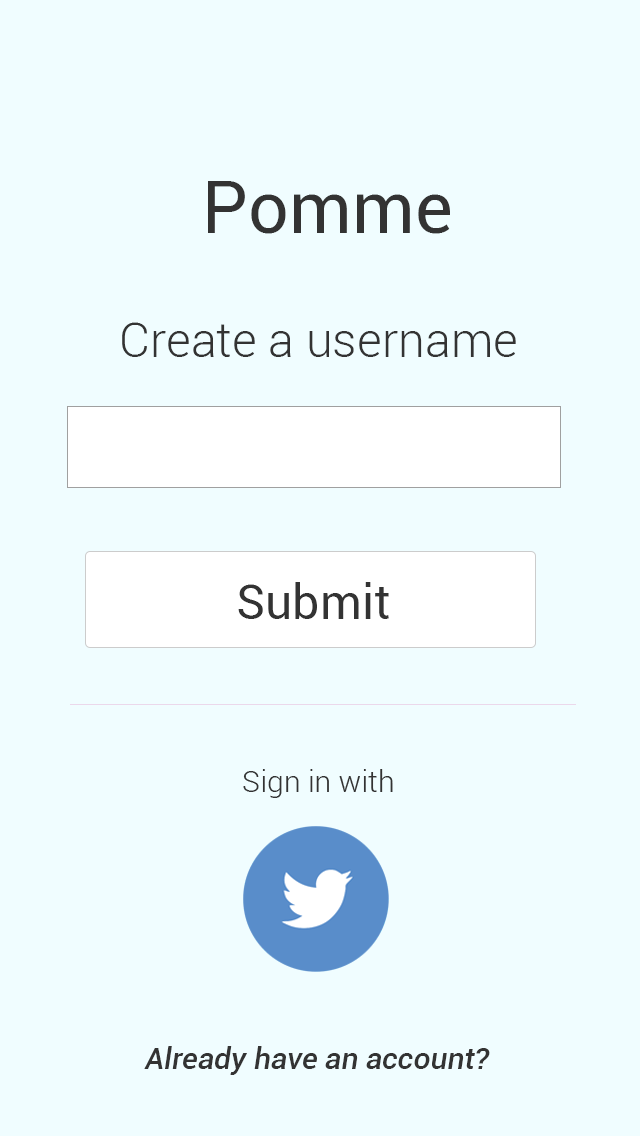
<style>
.page{position:relative;width:640px;height:1136px;background:#f0fdff}
.page>*{position:absolute;margin:0}
.t1{font:72px "Roboto-Regular";color:#333333}
.t2{font:48px "Roboto-Light";color:#333333}
.t3{font:48px "Roboto-Regular";color:#333333}
.t4{font:30px "Roboto-Light";color:#333333}
.t5{font:30px "Roboto-MediumItalic";color:#333333}
</style>
<div class="page">
<p class="t1" style="left:208px;top:181px;width:242px;height:53px">Pomme</p>
<p class="t2" style="left:122px;top:322px;width:394px;height:35px">Create a username</p>
<p class="t3" style="left:238px;top:582px;width:151px;height:37px">Submit</p>
<p class="t4" style="left:243px;top:769px;width:150px;height:29px">Sign in with</p>
<p class="t5" style="left:144px;top:1046px;width:346px;height:29px">Already have an account?</p>
</div>
